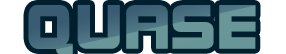
<style>
.page{position:relative;width:286px;height:54px;background:#001f2e}
.page>*{position:absolute;margin:0}
.t1{font:69.3px "DFSoGeiStd-W9";scale:0.92 1}
</style>
<div class="page">
<p class="t1" style="left:28px;top:5px;width:228px;height:50px">QUASE</p>
</div>
